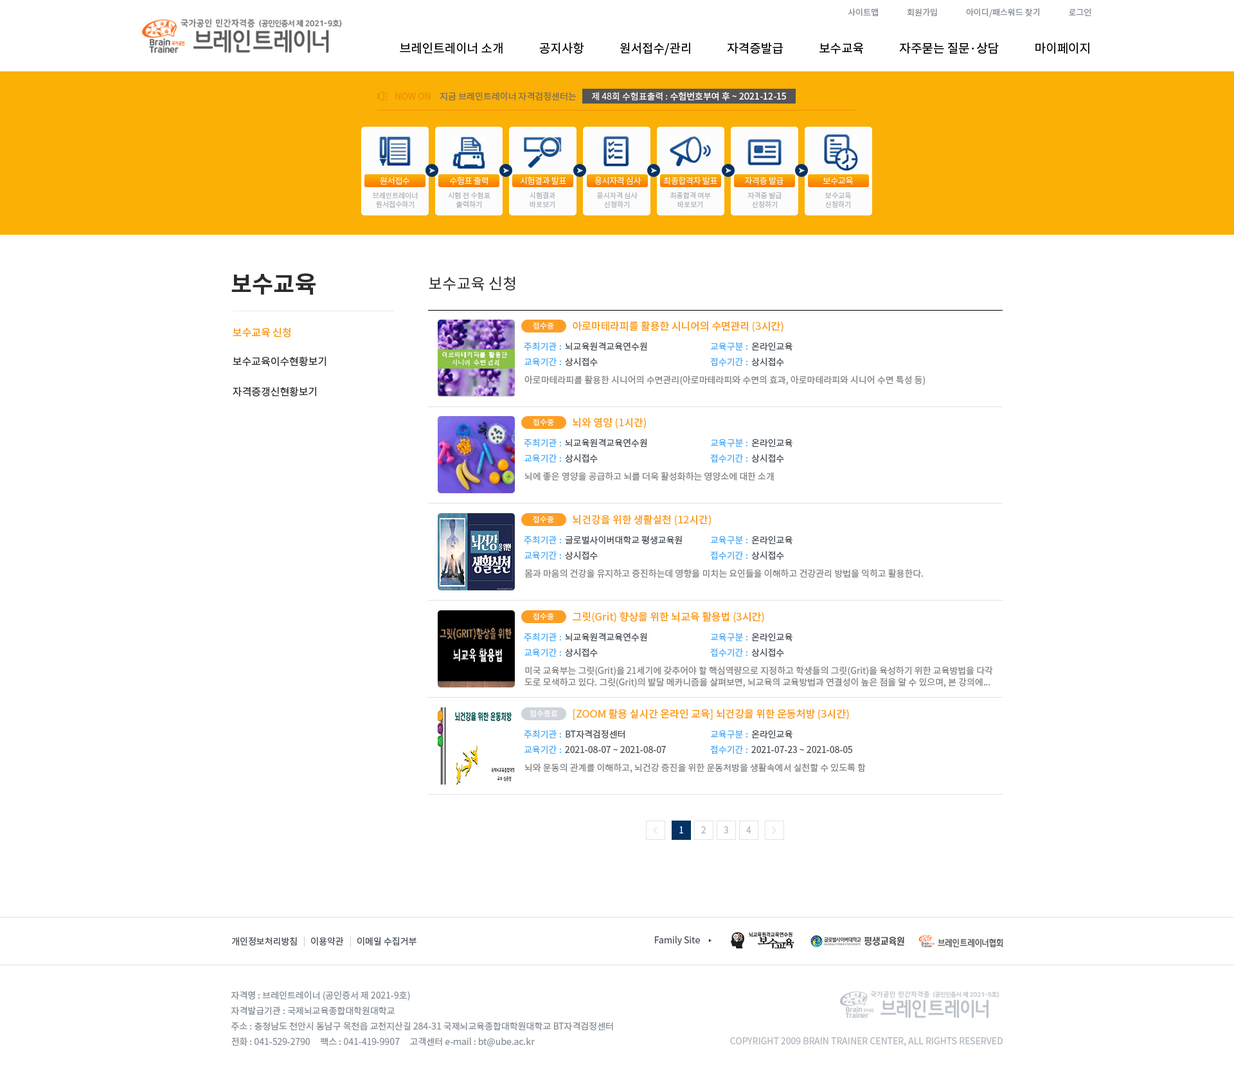
<style>
.page{position:relative;width:1234px;height:1072px;background:#ffffff}
.page>*{position:absolute;margin:0}
.t1{font:8.4px "NotoSansCJKkr-Regular";letter-spacing:0.001em;color:#868e96}
.t2{font:12.2px "NotoSansCJKkr-Regular";color:#000000}
.t3{font:9px "NotoSansCJKkr-Regular";color:#f08c00}
.t4{font:9px "NotoSansCJKkr-Regular";color:#7c6d5d}
.t5{font:9px "NotoSansCJKkr-Medium";color:#f8f8f8}
.t6{font:9px "NotoSansCJKkr-Regular";color:#f8f8f8}
.t7{font:8.4px "NotoSansCJKkr-Light";letter-spacing:-0.025em;color:#fcfcfc}
.t8{font:7.1px/9px "NotoSansCJKkr-Regular";color:#adb5bd}
.t9{font:23.1px "NotoSansCJKkr-Bold";color:#2b2b2b}
.t10{font:15.4px "NotoSansCJKkr-Regular";color:#2b2b2b}
.t11{font:10.3px "NotoSansCJKkr-Medium";color:#fd9f27}
.t12{font:7.7px "NotoSansCJKkr-Regular";color:#ffffff}
.t13{font:9px "NotoSansCJKkr-Regular";color:#4dabf7}
.t14{font:9px "NotoSansCJKkr-Regular";color:#495057}
.t15{font:10.3px "NotoSansCJKkr-Regular";color:#2b2b2b}
.t16{font:9px "NotoSansCJKkr-Regular";color:#838383}
.t17{font:9px/11.6px "NotoSansCJKkr-Regular";color:#838383}
.t18{font:9px "NotoSansCJKkr-Regular";color:#ffffff}
.t19{font:9px "NotoSansCJKkr-Regular";color:#adb5bd}
.t20{font:9px "NotoSansCJKkr-Regular";color:#ced4da}
.t21{font:9px/15.4px "NotoSansCJKkr-Regular";color:#868e96}
</style>
<div class="page">
<p class="t1" style="left:848px;top:8px;width:244px;height:9px">사이트맵               회원가입               아이디/패스워드 찾기               로그인</p>
<p class="t2" style="left:400px;top:42px;width:690px;height:13px">브레인트레이너 소개             공지사항             원서접수/관리             자격증발급             보수교육             자주묻는 질문·상담             마이페이지</p>
<p class="t3" style="left:395px;top:93px;width:36px;height:7px">NOW ON</p>
<p class="t4" style="left:440px;top:92px;width:137px;height:9px">지금 브레인트레이너 자격검정센터는</p>
<p class="t5" style="left:592px;top:92px;width:194px;height:9px"><span class="t6">제 48회 수험표출력 : </span>수험번호부여 후 ~ 2021-12-15</p>
<p class="t7" style="left:380px;top:177px;width:30px;height:8px">원서접수</p>
<p class="t7" style="left:450px;top:176px;width:38px;height:9px">수험표 출력</p>
<p class="t7" style="left:520px;top:176px;width:46px;height:8px">시험결과 발표</p>
<p class="t7" style="left:595px;top:176px;width:47px;height:9px">응시자격 심사</p>
<p class="t7" style="left:663px;top:176px;width:54px;height:9px">최종합격자 발표</p>
<p class="t7" style="left:745px;top:176px;width:39px;height:9px">자격증 발급</p>
<p class="t7" style="left:823px;top:177px;width:30px;height:8px">보수교육</p>
<p class="t8" style="left:373px;top:192px;width:45px;height:16px;text-align:center">브레인트레이너<br>원서접수하기</p>
<p class="t8" style="left:448px;top:192px;width:43px;height:16px;text-align:center">시험 전 수험표<br>출력하기</p>
<p class="t8" style="left:530px;top:192px;width:25px;height:16px;text-align:center">시험결과<br>바로보기</p>
<p class="t8" style="left:597px;top:192px;width:41px;height:16px;text-align:center">응시자격 심사<br>신청하기</p>
<p class="t8" style="left:670px;top:192px;width:41px;height:16px;text-align:center">최종합격 여부<br>바로보기</p>
<p class="t8" style="left:748px;top:192px;width:34px;height:16px;text-align:center">자격증 발급<br>신청하기</p>
<p class="t8" style="left:825px;top:192px;width:27px;height:16px;text-align:center">보수교육<br>신청하기</p>
<p class="t9" style="left:231px;top:273px;width:85px;height:22px">보수교육</p>
<p class="t10" style="left:429px;top:276px;width:86px;height:15px">보수교육 신청</p>
<p class="t11" style="left:233px;top:327px;width:58px;height:11px">보수교육 신청</p>
<p class="t12" style="left:533px;top:322px;width:21px;height:7px">접수중</p>
<p class="t11" style="left:573px;top:321px;width:211px;height:11px">아로마테라피를 활용한 시니어의 수면관리 (3시간)</p>
<p class="t13" style="left:524px;top:342px;width:37px;height:9px">주최기관 :</p>
<p class="t14" style="left:565px;top:342px;width:82px;height:9px">뇌교육원격교육연수원</p>
<p class="t13" style="left:711px;top:342px;width:37px;height:9px">교육구분 :</p>
<p class="t14" style="left:752px;top:342px;width:41px;height:9px">온라인교육</p>
<p class="t15" style="left:233px;top:356px;width:93px;height:10px">보수교육이수현황보기</p>
<p class="t13" style="left:525px;top:357px;width:36px;height:9px">교육기간 :</p>
<p class="t14" style="left:565px;top:357px;width:33px;height:9px">상시접수</p>
<p class="t13" style="left:710px;top:357px;width:38px;height:9px">접수기간 :</p>
<p class="t14" style="left:752px;top:357px;width:32px;height:9px">상시접수</p>
<p class="t16" style="left:525px;top:375px;width:400px;height:10px">아로마테라피를 활용한 시니어의 수면관리(아로마테라피와 수면의 효과, 아로마테라피와 시니어 수면 특성 등)</p>
<p class="t15" style="left:233px;top:386px;width:83px;height:11px">자격증갱신현황보기</p>
<p class="t12" style="left:533px;top:419px;width:21px;height:7px">접수중</p>
<p class="t11" style="left:573px;top:417px;width:73px;height:12px">뇌와 영양 (1시간)</p>
<p class="t13" style="left:524px;top:438px;width:37px;height:9px">주최기관 :</p>
<p class="t14" style="left:565px;top:438px;width:82px;height:9px">뇌교육원격교육연수원</p>
<p class="t13" style="left:711px;top:438px;width:37px;height:9px">교육구분 :</p>
<p class="t14" style="left:752px;top:438px;width:41px;height:9px">온라인교육</p>
<p class="t13" style="left:525px;top:454px;width:36px;height:9px">교육기간 :</p>
<p class="t14" style="left:565px;top:454px;width:33px;height:9px">상시접수</p>
<p class="t13" style="left:710px;top:454px;width:38px;height:9px">접수기간 :</p>
<p class="t14" style="left:752px;top:454px;width:32px;height:9px">상시접수</p>
<p class="t16" style="left:525px;top:471px;width:249px;height:10px">뇌에 좋은 영양을 공급하고 뇌를 더욱 활성화하는 영양소에 대한 소개</p>
<p class="t12" style="left:533px;top:516px;width:21px;height:7px">접수중</p>
<p class="t11" style="left:573px;top:514px;width:138px;height:12px">뇌건강을 위한 생활실천 (12시간)</p>
<p class="t13" style="left:524px;top:536px;width:37px;height:8px">주최기관 :</p>
<p class="t14" style="left:565px;top:536px;width:117px;height:8px">글로벌사이버대학교 평생교육원</p>
<p class="t13" style="left:711px;top:536px;width:37px;height:8px">교육구분 :</p>
<p class="t14" style="left:752px;top:536px;width:41px;height:8px">온라인교육</p>
<p class="t13" style="left:525px;top:551px;width:36px;height:9px">교육기간 :</p>
<p class="t14" style="left:565px;top:551px;width:33px;height:9px">상시접수</p>
<p class="t13" style="left:710px;top:551px;width:38px;height:9px">접수기간 :</p>
<p class="t14" style="left:752px;top:551px;width:32px;height:9px">상시접수</p>
<p class="t16" style="left:525px;top:568px;width:399px;height:10px">몸과 마음의 건강을 유지하고 증진하는데 영향을 미치는 요인들을 이해하고 건강관리 방법을 익히고 활용한다.</p>
<p class="t12" style="left:533px;top:613px;width:21px;height:7px">접수중</p>
<p class="t11" style="left:573px;top:611px;width:191px;height:12px">그릿(Grit) 향상을 위한 뇌교육 활용법 (3시간)</p>
<p class="t13" style="left:524px;top:633px;width:37px;height:9px">주최기관 :</p>
<p class="t14" style="left:565px;top:633px;width:82px;height:9px">뇌교육원격교육연수원</p>
<p class="t13" style="left:711px;top:633px;width:37px;height:9px">교육구분 :</p>
<p class="t14" style="left:752px;top:633px;width:41px;height:9px">온라인교육</p>
<p class="t13" style="left:525px;top:648px;width:36px;height:9px">교육기간 :</p>
<p class="t14" style="left:565px;top:648px;width:33px;height:9px">상시접수</p>
<p class="t13" style="left:710px;top:648px;width:38px;height:9px">접수기간 :</p>
<p class="t14" style="left:752px;top:648px;width:32px;height:9px">상시접수</p>
<p class="t17" style="left:525px;top:666px;width:468px;height:21px">미국 교육부는 그릿(Grit)을 21세기에 갖추어야 할 핵심역량으로 지정하고 학생들의 그릿(Grit)을 육성하기 위한 교육방법을 다각<br>도로 모색하고 있다. 그릿(Grit)의 발달 메카니즘을 살펴보면, 뇌교육의 교육방법과 연결성이 높은 점을 알 수 있으며, 본 강의에...</p>
<p class="t12" style="left:530px;top:710px;width:28px;height:7px">접수종료</p>
<p class="t11" style="left:573px;top:708px;width:276px;height:12px">[ZOOM 활용 실시간 온라인 교육] 뇌건강을 위한 운동처방 (3시간)</p>
<p class="t13" style="left:524px;top:730px;width:37px;height:9px">주최기관 :</p>
<p class="t14" style="left:566px;top:730px;width:59px;height:9px">BT자격검정센터</p>
<p class="t13" style="left:711px;top:730px;width:37px;height:9px">교육구분 :</p>
<p class="t14" style="left:752px;top:730px;width:41px;height:9px">온라인교육</p>
<p class="t13" style="left:525px;top:745px;width:36px;height:9px">교육기간 :</p>
<p class="t14" style="left:565px;top:746px;width:101px;height:7px">2021-08-07 ~ 2021-08-07</p>
<p class="t13" style="left:710px;top:745px;width:38px;height:9px">접수기간 :</p>
<p class="t14" style="left:752px;top:746px;width:100px;height:7px">2021-07-23 ~ 2021-08-05</p>
<p class="t16" style="left:525px;top:762px;width:341px;height:11px">뇌와 운동의 관계를 이해하고, 뇌건강 증진을 위한 운동처방을 생활속에서 실천할 수 있도록 함</p>
<p class="t18" style="left:680px;top:826px;width:3px;height:7px">1</p>
<p class="t19" style="left:701px;top:826px;width:5px;height:7px">2</p>
<p class="t19" style="left:724px;top:826px;width:4px;height:7px">3</p>
<p class="t19" style="left:746px;top:826px;width:6px;height:7px">4</p>
<p class="t14" style="left:231px;top:937px;width:66px;height:9px">개인정보처리방침</p>
<p class="t20" style="left:303px;top:936px;width:2px;height:10px">|</p>
<p class="t14" style="left:311px;top:937px;width:33px;height:9px">이용약관</p>
<p class="t20" style="left:350px;top:936px;width:1px;height:10px">|</p>
<p class="t14" style="left:357px;top:937px;width:60px;height:9px">이메일 수집거부</p>
<p class="t14" style="left:655px;top:935px;width:45px;height:10px">Family Site</p>
<p class="t21" style="left:231px;top:991px;width:382px;height:56px">자격명 : 브레인트레이너 (공인증서 제 2021-9호)<br>자격발급기관 : 국제뇌교육종합대학원대학교<br>주소 : 충청남도 천안시 동남구 목천읍 교천지산길 284-31 국제뇌교육종합대학원대학교 BT자격검정센터<br>전화 : 041-529-2790     팩스 : 041-419-9907     고객센터 e-mail : bt@ube.ac.kr</p>
<p class="t19" style="left:730px;top:1037px;width:273px;height:9px">COPYRIGHT 2009 BRAIN TRAINER CENTER, ALL RIGHTS RESERVED</p>
</div>
